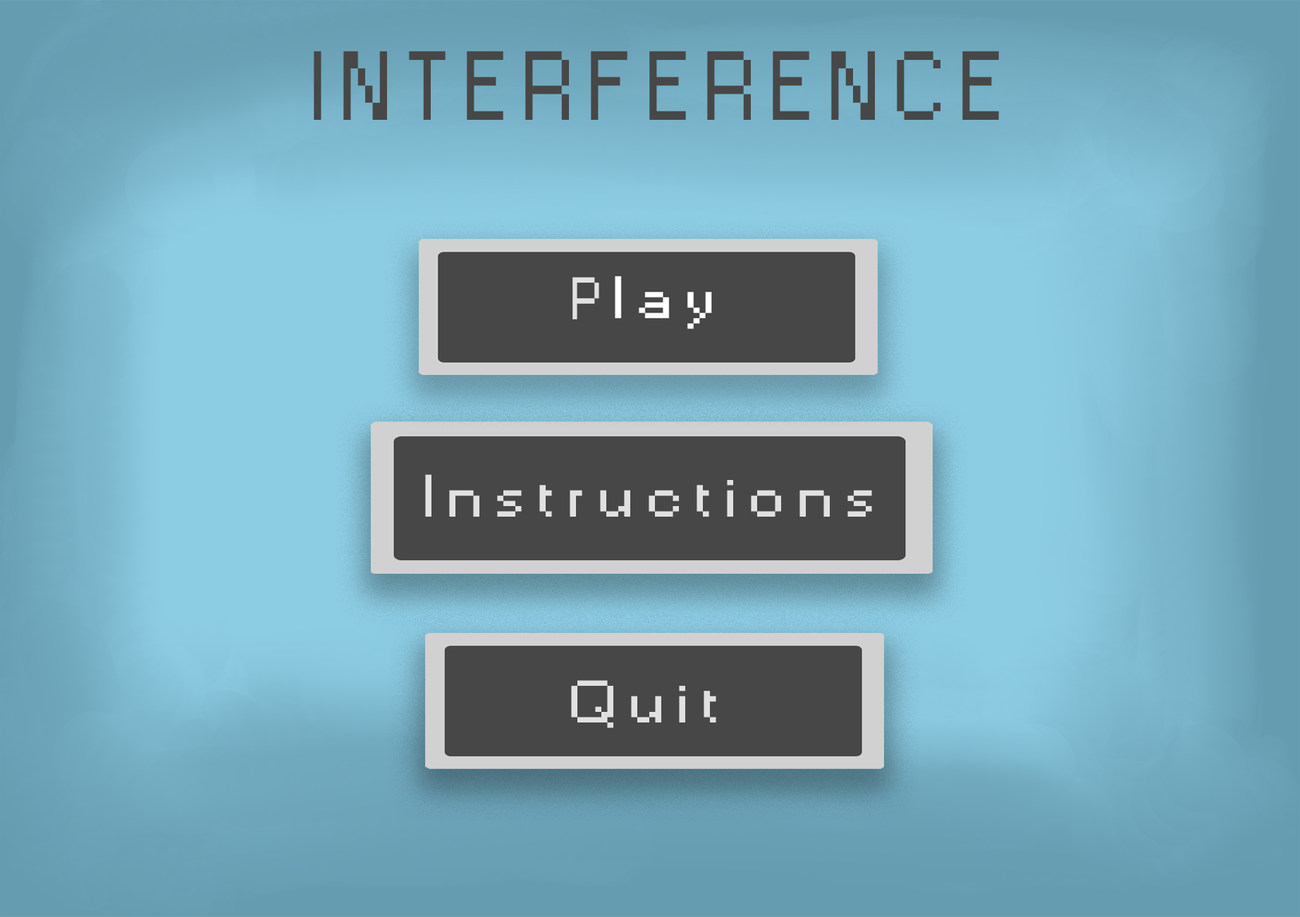
<style>
.page{position:relative;width:1300px;height:917px}
.page>*{position:absolute;margin:0}
.t1{font:91.3px "Small Fonts";letter-spacing:0.16em;color:#474747}
.t2{font:56px "Small Fonts";letter-spacing:0.16em;color:#e1e1e1}
.t3{font:56px "Small Fonts";letter-spacing:0.16em;color:#e1e1e1;scale:1.37 1}
</style>
<div class="page">
<p class="t1" style="left:314px;top:51px;width:685px;height:69px">INTERFERENCE</p>
<p class="t2" style="left:572px;top:277px;width:27px;height:42px">P</p>
<p class="t3" style="left:425px;top:474px;width:447px;height:43px">Instructions</p>
<p class="t3" style="left:571px;top:680px;width:145px;height:48px">Quit</p>
</div>
